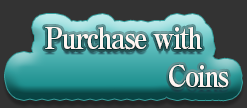
<style>
.page{position:relative;width:247px;height:108px;background:#333333}
.page>*{position:absolute;margin:0}
.t1{font:30px/38px "RyuminPro-ExBold";letter-spacing:-0.08em;color:#fff5f1;scale:0.9 1}
</style>
<div class="page">
<p class="t1" style="left:45px;top:27px;width:184px;height:61px;text-align:center">Purchase with<br>                      Coins</p>
</div>
